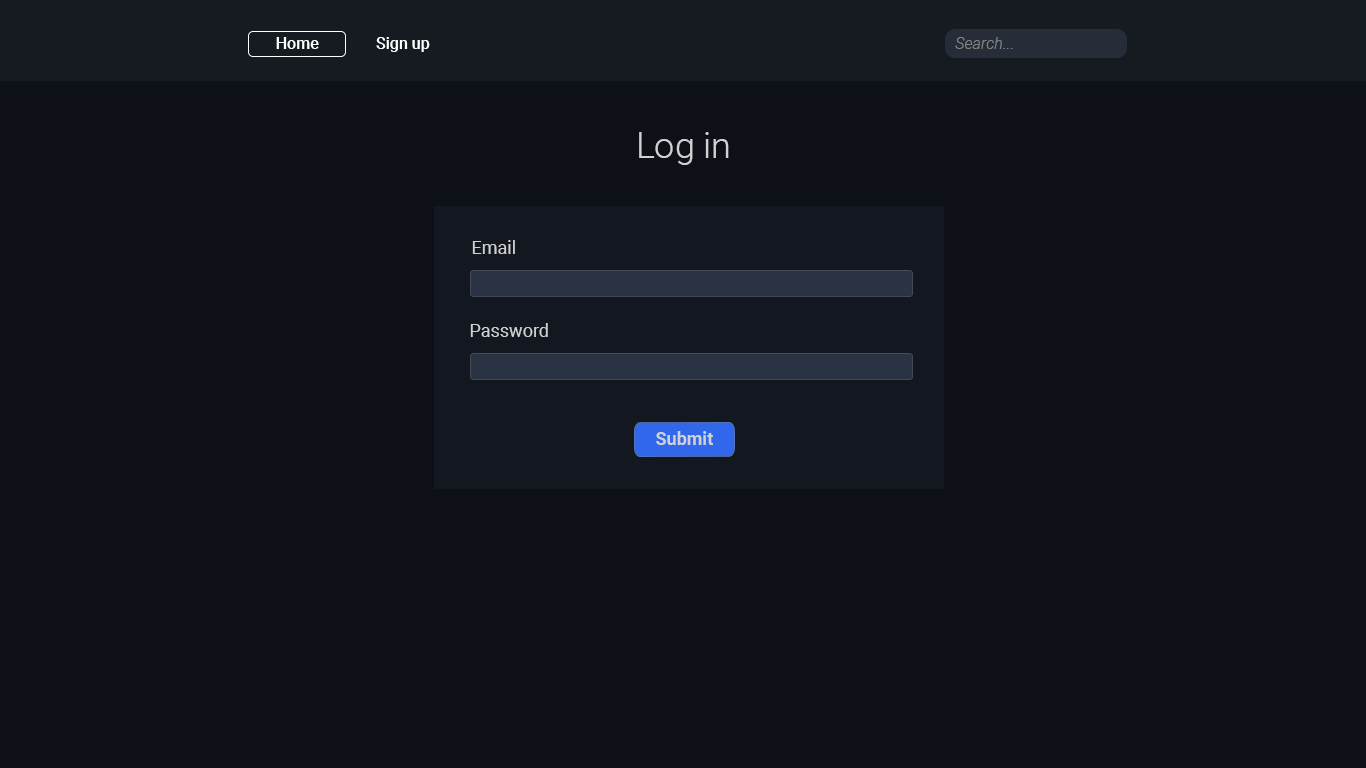
<style>
.page{position:relative;width:1366px;height:768px;background:#0d1117}
.page>*{position:absolute;margin:0}
.t1{font:16px "Roboto-Medium";color:#ffffff}
.t2{font:16px "Roboto-LightItalic";color:#808283}
.t3{font:36px "Roboto-Light";color:#d0d1d2}
.t4{font:18px "Roboto-Regular";color:#d0d1d2}
.t5{font:18px "Roboto-Bold";color:#d0d1d2}
</style>
<div class="page">
<p class="t1" style="left:276px;top:37px;width:43px;height:12px">Home</p>
<p class="t1" style="left:376px;top:37px;width:54px;height:15px">Sign up</p>
<p class="t2" style="left:955px;top:37px;width:58px;height:12px">Search...</p>
<p class="t3" style="left:639px;top:132px;width:90px;height:33px">Log in</p>
<p class="t4" style="left:472px;top:240px;width:43px;height:14px">Email</p>
<p class="t4" style="left:470px;top:323px;width:78px;height:14px">Password</p>
<p class="t5" style="left:656px;top:431px;width:57px;height:14px">Submit</p>
</div>
